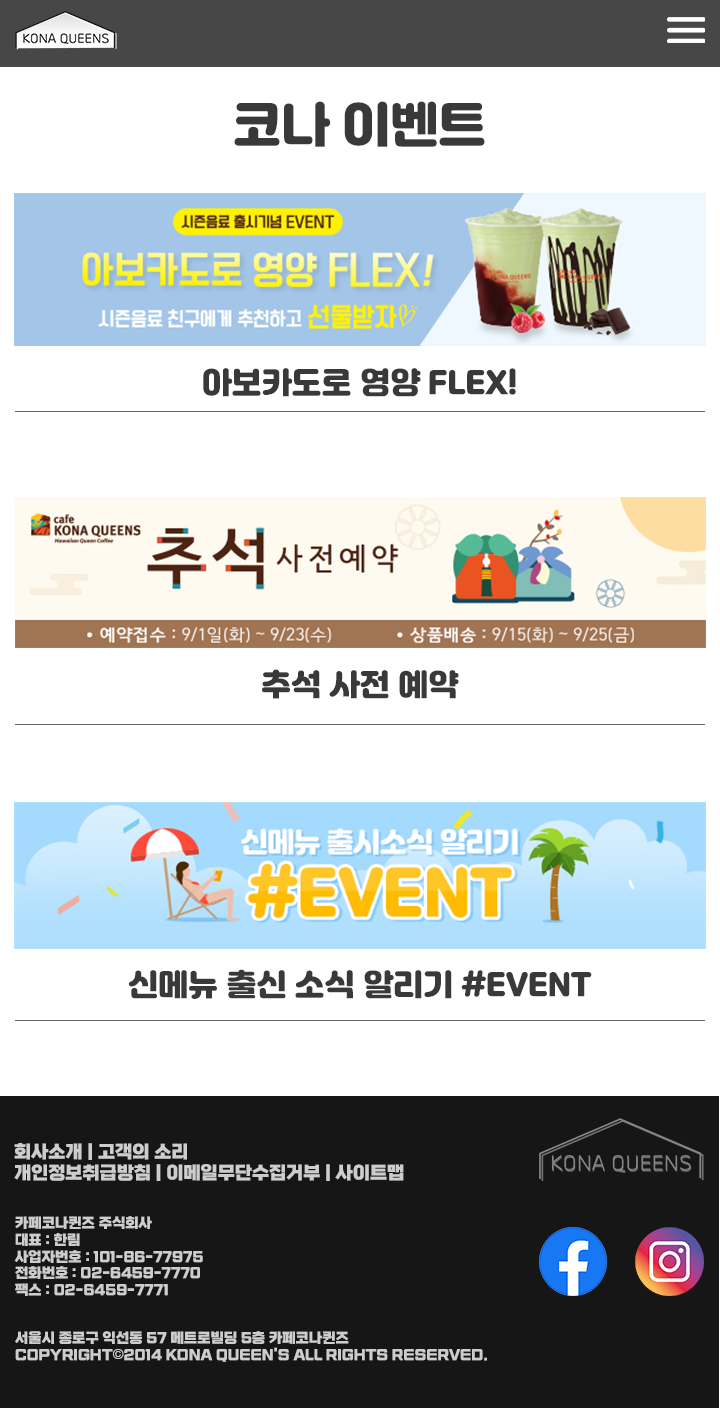
<style>
.page{position:relative;width:720px;height:1408px;background:#ffffff}
.page>*{position:absolute;margin:0}
.t1{font:48px "Jalnan";color:#393939}
.t2{font:30px "Jalnan";color:#393939}
.t3{font:18px "esamanruBold";color:#cdcdcd}
.t4{font:14px "esamanruBold";color:#cdcdcd}
.t5{font:14px "Gulim";color:#cdcdcd}
</style>
<div class="page">
<p class="t1" style="left:234px;top:101px;width:251px;height:46px">코나 이벤트</p>
<p class="t2" style="left:203px;top:368px;width:313px;height:29px">아보카도로 영양 FLEX!</p>
<p class="t2" style="left:262px;top:669px;width:197px;height:30px">추석 사전 예약</p>
<p class="t2" style="left:128px;top:969px;width:464px;height:30px">신메뉴 출신 소식 알리기 #EVENT</p>
<p class="t3" style="left:14px;top:1143px;width:390px;height:38px">회사소개 | 고객의 소리 <br>개인정보취급방침 | 이메일무단수집거부 | 사이트맵</p>
<p class="t4" style="left:14px;top:1216px;width:473px;height:146px">카페코나퀸즈 주식회사   <br>대표 : 한림   <br>사업자번호 : 101-86-77975  <br>전화번호 : 02-6459-7770   <br>팩스 : 02-6459-7771<br><br><br>서울시 종로구 익선동 57 메트로빌딩 5층 카페코나퀸즈<br>COPYRIGHT<span class="t5">©</span>2014 KONA QUEEN'S ALL RIGHTS RESERVED.</p>
</div>
